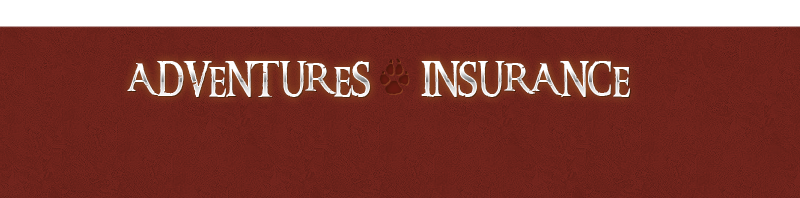
<style>
.page{position:relative;width:800px;height:198px}
.page>*{position:absolute;margin:0}
.t1{font:34px "RingbearerMedium";color:#ffffff;text-transform:uppercase}
.t2{font:44px "AnimalTracks";color:#681a12}
</style>
<div class="page">
<p class="t1" style="left:127px;top:61px;width:243px;height:36px">Ad ventures</p>
<p class="t2" style="left:380px;top:58px;width:29px;height:37px">i</p>
<p class="t1" style="left:421px;top:61px;width:209px;height:36px">insurance</p>
</div>
